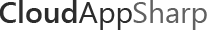
<style>
.page{position:relative;width:207px;height:30px;background:#ffffff}
.page>*{position:absolute;margin:0}
.t1{font:30px "SegoeUI-SemiBold";color:#2c2c2c}
.t2{font:30px "SegoeUI";color:#2c2c2c}
.t3{font:30px "SegoeUI";color:#616161}
</style>
<div class="page">
<p class="t1" style="left:0px;top:0px;width:132px;height:30px">Cloud<span class="t2">App</span></p>
<p class="t3" style="left:133px;top:0px;width:74px;height:30px">Sharp</p>
</div>
